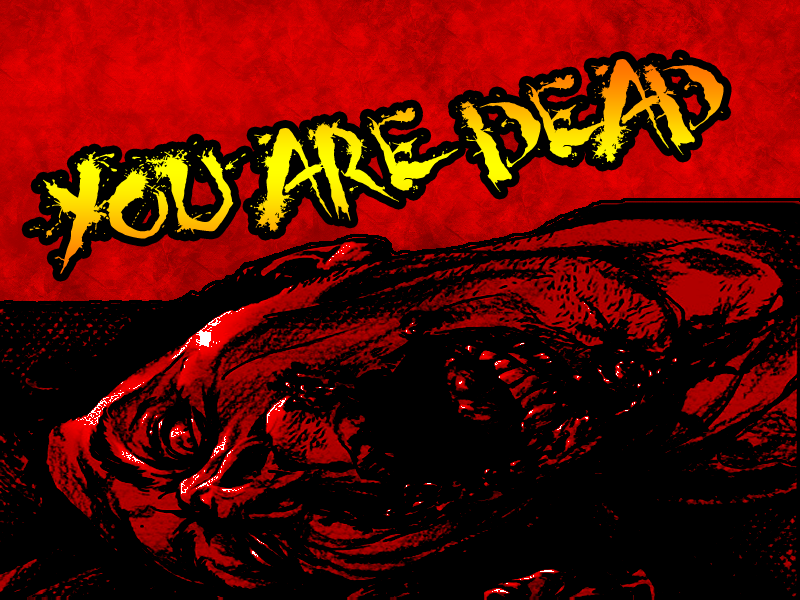
<style>
.page{position:relative;width:800px;height:600px;background:#000000}
.page>*{position:absolute;margin:0}
.t1{font:120px "ShogunsClan"}
</style>
<div class="page">
<p class="t1" style="left:29px;top:57px;width:695px;height:217px;rotate:-12deg">YOU ARE DEAD</p>
</div>
